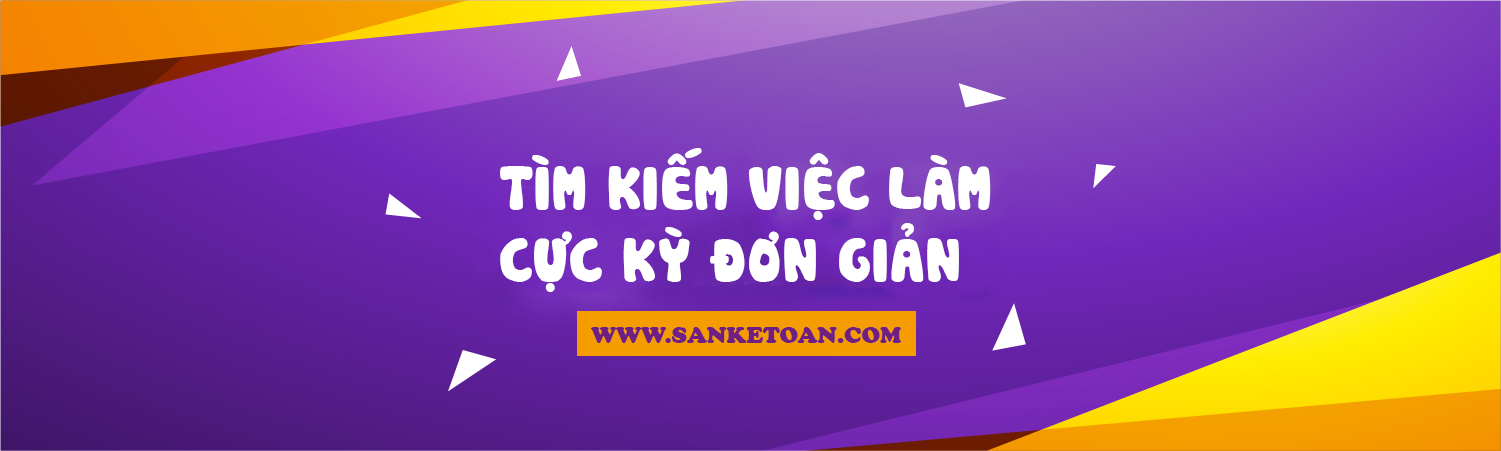
<style>
.page{position:relative;width:1501px;height:451px}
.page>*{position:absolute;margin:0}
.t1{font:60px "SVN-Cookies";color:#ffffff}
.t2{font:24px "CooperBlack";color:#6f1e81}
</style>
<div class="page">
<p class="t1" style="left:500px;top:148px;width:491px;height:144px">TÌM KIẾM VIỆC LÀM<br>CỰC KỲ ĐƠN GIẢN</p>
<p class="t2" style="left:591px;top:327px;width:310px;height:16px">WWW.SANKETOAN.COM</p>
</div>
